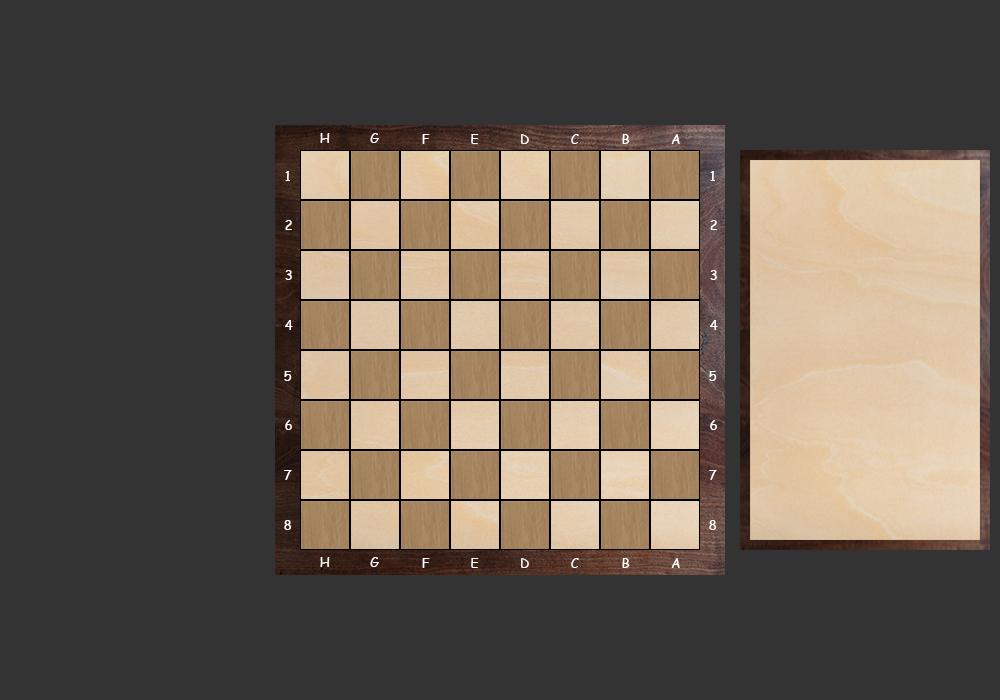
<style>
.page{position:relative;width:1000px;height:700px;background:#333333}
.page>*{position:absolute;margin:0}
.t1{font:12.5px "ComicSansMS";color:#ffffff}
</style>
<div class="page">
<p class="t1" style="left:320px;top:133px;width:10px;height:10px">H</p>
<p class="t1" style="left:370px;top:133px;width:9px;height:10px">G</p>
<p class="t1" style="left:422px;top:134px;width:8px;height:10px">F</p>
<p class="t1" style="left:471px;top:134px;width:8px;height:10px">E</p>
<p class="t1" style="left:521px;top:134px;width:8px;height:10px">D</p>
<p class="t1" style="left:571px;top:134px;width:8px;height:10px">C</p>
<p class="t1" style="left:622px;top:134px;width:8px;height:10px">B</p>
<p class="t1" style="left:671px;top:134px;width:9px;height:10px">A</p>
<p class="t1" style="left:285px;top:171px;width:5px;height:10px">1</p>
<p class="t1" style="left:710px;top:171px;width:5px;height:10px">1</p>
<p class="t1" style="left:285px;top:220px;width:7px;height:10px">2</p>
<p class="t1" style="left:710px;top:220px;width:7px;height:10px">2</p>
<p class="t1" style="left:285px;top:270px;width:7px;height:10px">3</p>
<p class="t1" style="left:710px;top:270px;width:7px;height:10px">3</p>
<p class="t1" style="left:285px;top:320px;width:8px;height:10px">4</p>
<p class="t1" style="left:710px;top:320px;width:8px;height:10px">4</p>
<p class="t1" style="left:284px;top:371px;width:8px;height:10px">5</p>
<p class="t1" style="left:709px;top:371px;width:8px;height:10px">5</p>
<p class="t1" style="left:285px;top:420px;width:7px;height:10px">6</p>
<p class="t1" style="left:710px;top:420px;width:7px;height:10px">6</p>
<p class="t1" style="left:284px;top:470px;width:8px;height:10px">7</p>
<p class="t1" style="left:709px;top:470px;width:8px;height:10px">7</p>
<p class="t1" style="left:284px;top:520px;width:7px;height:10px">8</p>
<p class="t1" style="left:709px;top:520px;width:7px;height:10px">8</p>
<p class="t1" style="left:320px;top:557px;width:10px;height:10px">H</p>
<p class="t1" style="left:370px;top:557px;width:9px;height:10px">G</p>
<p class="t1" style="left:422px;top:558px;width:8px;height:10px">F</p>
<p class="t1" style="left:471px;top:558px;width:8px;height:10px">E</p>
<p class="t1" style="left:521px;top:558px;width:8px;height:10px">D</p>
<p class="t1" style="left:571px;top:558px;width:8px;height:10px">C</p>
<p class="t1" style="left:622px;top:558px;width:8px;height:10px">B</p>
<p class="t1" style="left:671px;top:558px;width:9px;height:10px">A</p>
</div>
